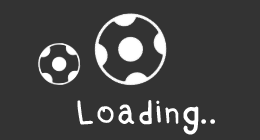
<style>
.page{position:relative;width:260px;height:140px;background:#333333}
.page>*{position:absolute;margin:0}
.t1{font:45px "Brutal_bounce-Regular";color:#ffffff}
</style>
<div class="page">
<p class="t1" style="left:77px;top:100px;width:122px;height:35px">Loading</p>
<p class="t1" style="left:201px;top:119px;width:5px;height:5px">.</p>
<p class="t1" style="left:210px;top:119px;width:5px;height:5px">.</p>
</div>
